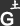
<style>
.page{position:relative;width:20px;height:26px;background:#333333}
.page>*{position:absolute;margin:0}
.t1{font:12px "DFKaiShu-SB-Estd-BF";color:#ffffff;font-weight:bold}
.t2{font:18px "ArialMT";color:#ffffff;font-weight:bold}
</style>
<div class="page">
<p class="t1" style="left:10px;top:0px;width:11px;height:10px">土</p>
<p class="t2" style="left:0px;top:11px;width:14px;height:15px">G</p>
</div>
